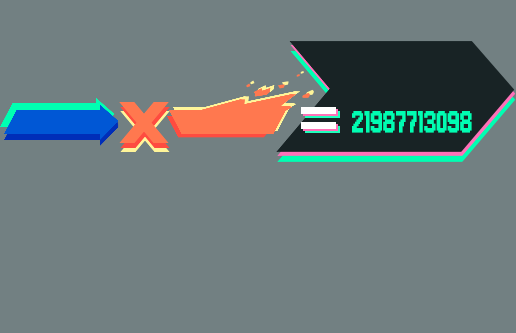
<style>
.page{position:relative;width:516px;height:333px;background:#728082}
.page>*{position:absolute;margin:0}
.t1{font:39.6px "Jersey10-Regular";letter-spacing:0.003em;color:#00fdb2;scale:0.73 1}
</style>
<div class="page">
<p class="t1" style="left:352px;top:111px;width:120px;height:22px">21987713098</p>
</div>
